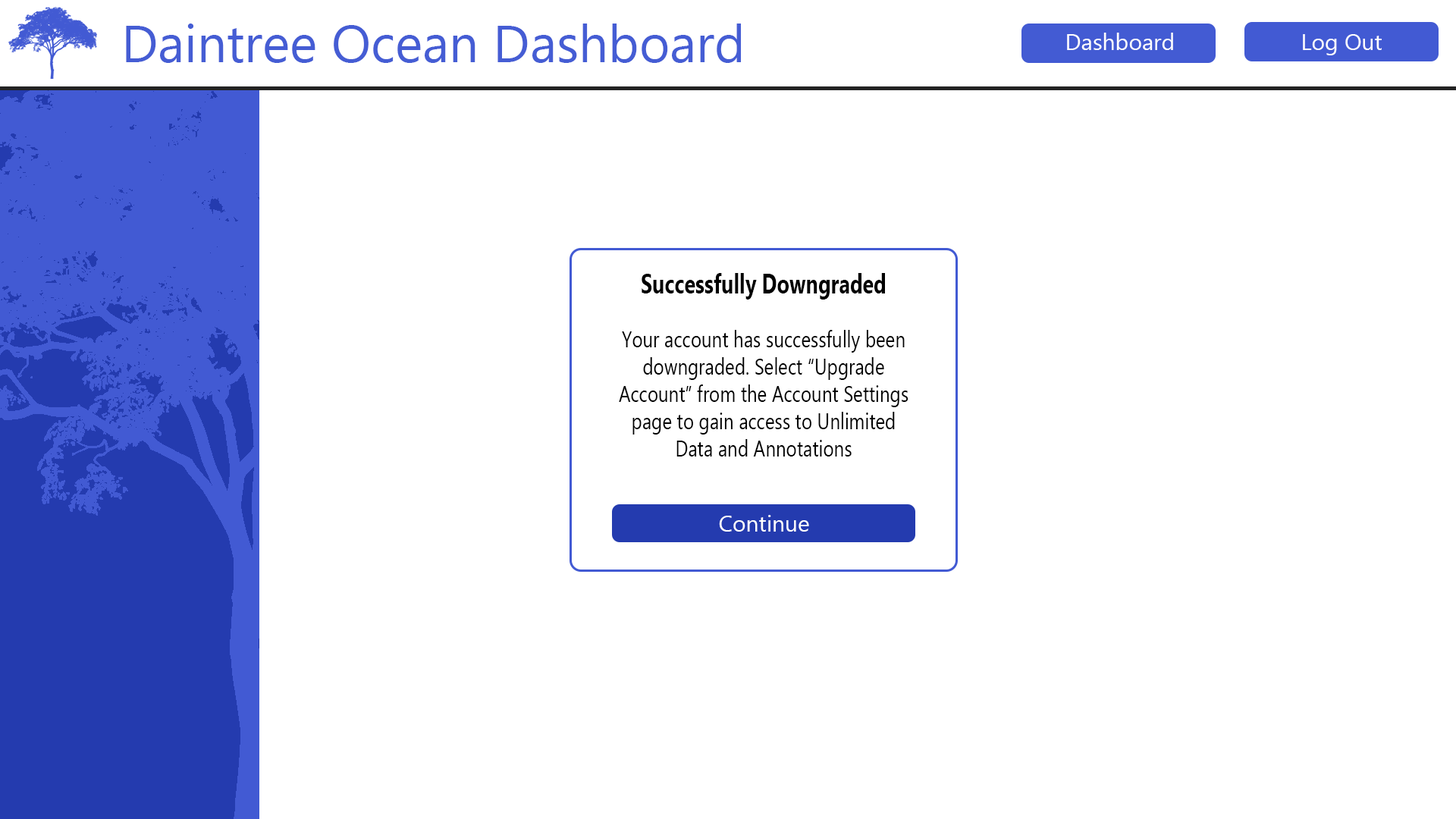
<style>
.page{position:relative;width:1456px;height:819px;background:#ffffff}
.page>*{position:absolute;margin:0}
.t1{font:52.3px "MyanmarText";color:#455dd4}
.t2{font:22.7px "MyanmarText";color:#ffffff}
.t3{font:27.3px "MyanmarText-Bold";color:#000000;scale:0.75 1}
.t4{font:22.7px "MyanmarText";color:#000000;scale:0.81 1}
</style>
<div class="page">
<p class="t1" style="left:126px;top:24px;width:615px;height:39px">Daintree Ocean Dashboard</p>
<p class="t2" style="left:1067px;top:33px;width:106px;height:17px">Dashboard</p>
<p class="t2" style="left:1303px;top:34px;width:79px;height:21px">Log Out</p>
<p class="t3" style="left:642px;top:273px;width:243px;height:27px">Successfully Downgraded</p>
<p class="t4" style="left:619px;top:330px;width:289px;height:127px;text-align:center">Your account has successfully been downgraded. Select “Upgrade <br>Account” from the Account Settings page to gain access to Unlimited Data and Annotations</p>
<p class="t2" style="left:719px;top:515px;width:90px;height:17px">Continue</p>
</div>
